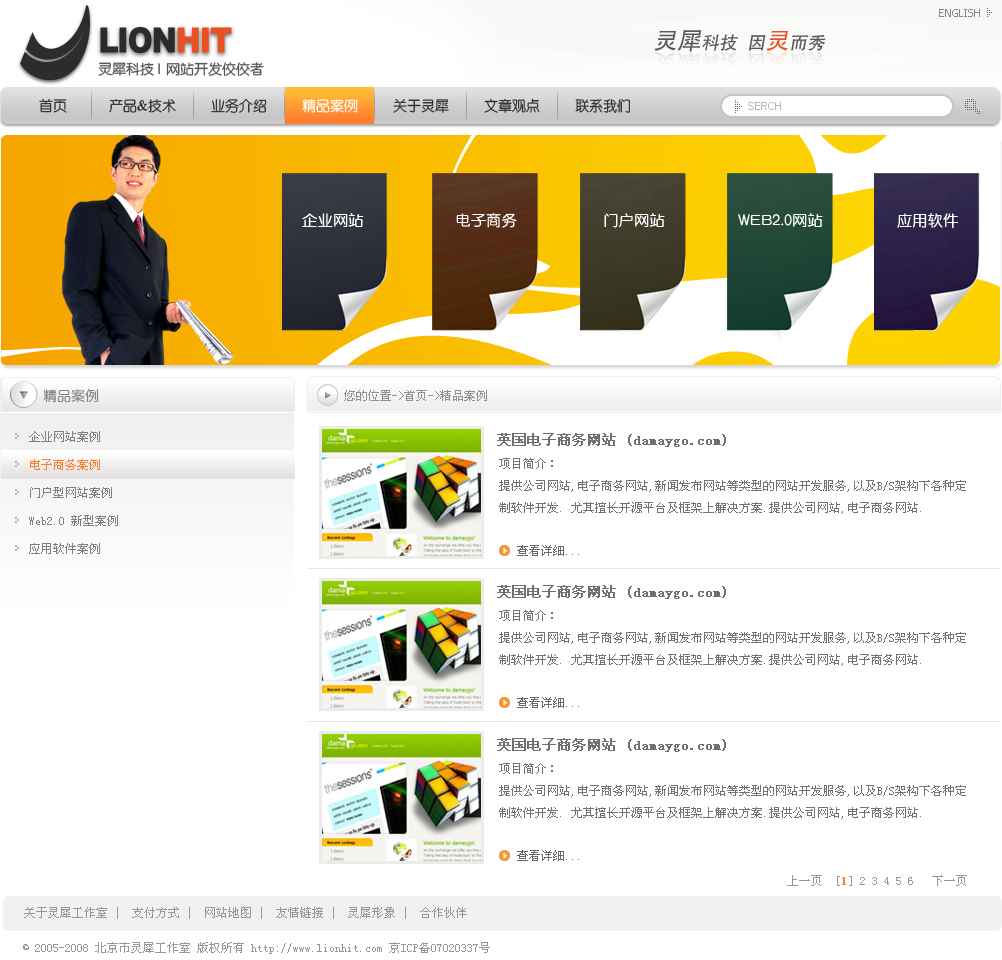
<style>
.page{position:relative;width:1002px;height:960px;background:#ffffff}
.page>*{position:absolute;margin:0}
.t1{font:11px "Tahoma";color:#898989}
.t2{font:34.7px "Arial-Black";letter-spacing:-0.05em;color:#2c2b2c;scale:0.88 1}
.t3{font:34.7px "Arial-Black";letter-spacing:-0.05em;color:#e95023;scale:0.88 1}
.t4{font:18px "FZHTJW--GB1-0";color:#585858;font-style:italic}
.t5{font:24px "FZHTJW--GB1-0";color:#585858;font-style:italic}
.t6{font:24px "FZHTJW--GB1-0";color:#e95023;font-style:italic}
.t7{font:14px "FZY3JW--GB1-0";color:#585858}
.t8{font:14px "ç»å¸åä½ç®-regular";color:#2c2c2c}
.t9{font:14px "ç»å¸åä½ç®-regular";color:#ffffff}
.t10{font:11px "ArialMT";color:#b9b9b9}
.t11{font:15.4px "ç»å¸ä¸­åç®-regular";color:#ffffff}
.t12{font:14px "ç»å¸ä¸­åç®-regular";color:#878787}
.t13{font:12px "SimSun";color:#8f8f8f}
.t14{font:12px/28px "SimSun";color:#808080}
.t15{font:12px/28px "SimSun";color:#fe7e32}
.t16{font:14px "SimSun";color:#707070;font-weight:bold}
.t17{font:12px/22px "SimSun";color:#737373}
.t18{font:12px "SimSun";color:#696969}
.t19{font:12px "SimSun";color:#979797}
.t20{font:12px "SimSun";color:#fe7e32;font-weight:bold}
</style>
<div class="page">
<p class="t1" style="left:939px;top:9px;width:41px;height:8px">ENGLISH</p>
<p class="t2" style="left:100px;top:27px;width:132px;height:26px">LION<span class="t3">HIT</span></p>
<p class="t4" style="left:654px;top:30px;width:172px;height:22px"><span class="t5">灵犀</span>科技  因<span class="t6">灵</span>而秀</p>
<p class="t7" style="left:98px;top:62px;width:62px;height:14px">灵犀科技 |</p>
<p class="t7" style="left:166px;top:62px;width:98px;height:15px">网站开发佼佼者</p>
<p class="t8" style="left:39px;top:98px;width:591px;height:15px">首页      产品&amp;技术     业务介绍     <span class="t9">精品案例</span>     关于灵犀     文章观点     联系我们</p>
<p class="t10" style="left:748px;top:102px;width:33px;height:8px">SERCH</p>
<p class="t11" style="left:302px;top:213px;width:62px;height:14px">企业网站</p>
<p class="t11" style="left:456px;top:212px;width:61px;height:16px">电子商务</p>
<p class="t11" style="left:604px;top:213px;width:61px;height:15px">门户网站</p>
<p class="t11" style="left:738px;top:213px;width:85px;height:14px">WEB2.0网站</p>
<p class="t11" style="left:897px;top:213px;width:62px;height:15px">应用软件</p>
<p class="t12" style="left:43px;top:389px;width:56px;height:14px">精品案例</p>
<p class="t13" style="left:344px;top:390px;width:143px;height:11px">您的位置-&gt;首页-&gt;精品案例</p>
<p class="t14" style="left:29px;top:431px;width:89px;height:123px">企业网站案例<br><span class="t15">电子商务案例<br></span>门户型网站案例<br>Web2.0 新型案例<br>应用软件案例</p>
<p class="t16" style="left:497px;top:433px;width:229px;height:14px">英国电子商务网站 (damaygo.com)</p>
<p class="t17" style="left:499px;top:458px;width:467px;height:56px">项目简介：<br>提供公司网站,电子商务网站,新闻发布网站等类型的网站开发服务,以及B/S架构下各种定<br>制软件开发. 尤其擅长开源平台及框架上解决方案.提供公司网站,电子商务网站.</p>
<p class="t18" style="left:517px;top:545px;width:62px;height:11px">查看详细...</p>
<p class="t16" style="left:497px;top:585px;width:229px;height:14px">英国电子商务网站 (damaygo.com)</p>
<p class="t17" style="left:499px;top:610px;width:467px;height:56px">项目简介：<br>提供公司网站,电子商务网站,新闻发布网站等类型的网站开发服务,以及B/S架构下各种定<br>制软件开发. 尤其擅长开源平台及框架上解决方案.提供公司网站,电子商务网站.</p>
<p class="t18" style="left:517px;top:697px;width:62px;height:11px">查看详细...</p>
<p class="t16" style="left:497px;top:738px;width:229px;height:14px">英国电子商务网站 (damaygo.com)</p>
<p class="t17" style="left:499px;top:763px;width:467px;height:56px">项目简介：<br>提供公司网站,电子商务网站,新闻发布网站等类型的网站开发服务,以及B/S架构下各种定<br>制软件开发. 尤其擅长开源平台及框架上解决方案.提供公司网站,电子商务网站.</p>
<p class="t18" style="left:517px;top:850px;width:62px;height:11px">查看详细...</p>
<p class="t19" style="left:787px;top:875px;width:180px;height:11px">上一页  [<span class="t20">1</span>] 2 3 4 5 6   下一页</p>
<p class="t19" style="left:24px;top:907px;width:443px;height:12px">关于灵犀工作室 |  支付方式 |  网站地图 |  友情链接 |  灵犀形象 |  合作伙伴</p>
<p class="t19" style="left:23px;top:942px;width:467px;height:12px">© 2005-2008 北京市灵犀工作室 版权所有 http://www.lionhit.com 京ICP备07020337号</p>
</div>
